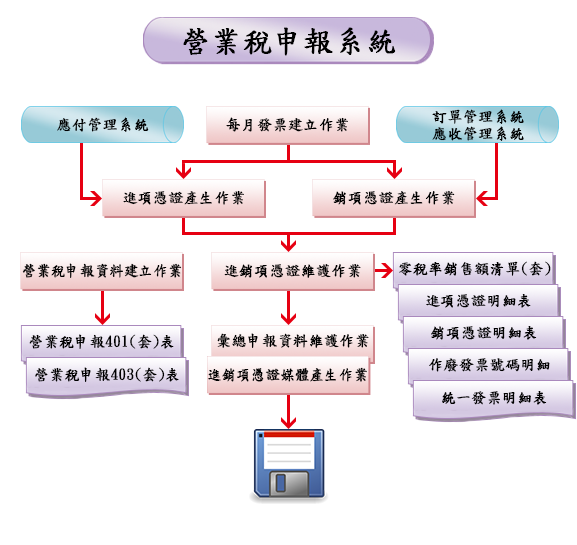
<style>
.page{position:relative;width:577px;height:545px;background:#ffffff}
.page>*{position:absolute;margin:0}
.t1{font:30px "DFKaiShu-SB-Estd-BF";color:#000000;font-weight:bold}
.t2{font:15px/17.5px "DFKaiShu-SB-Estd-BF";color:#000000;font-weight:bold}
.t3{font:15px "DFKaiShu-SB-Estd-BF";color:#000000;font-weight:bold}
.t4{font:15px "DFKaiShu-SB-Estd-BF";color:#000000;font-weight:bold;scale:0.95 1}
</style>
<div class="page">
<p class="t1" style="left:183px;top:27px;width:213px;height:29px">營業稅申報系統</p>
<p class="t2" style="left:432px;top:109px;width:92px;height:32px;text-align:center">訂單管理系統<br>應收管理系統</p>
<p class="t3" style="left:57px;top:117px;width:92px;height:15px">應付管理系統</p>
<p class="t3" style="left:226px;top:117px;width:122px;height:15px">每月發票建立作業</p>
<p class="t3" style="left:123px;top:190px;width:121px;height:15px">進項憑證產生作業</p>
<p class="t3" style="left:333px;top:190px;width:122px;height:15px">銷項憑證產生作業</p>
<p class="t4" style="left:22px;top:263px;width:160px;height:15px">營業稅申報資料建立作業</p>
<p class="t3" style="left:224px;top:264px;width:137px;height:14px">進銷項憑證維護作業</p>
<p class="t3" style="left:399px;top:261px;width:152px;height:15px">零稅率銷售額清單(套)</p>
<p class="t3" style="left:426px;top:294px;width:105px;height:14px">進項憑證明細表</p>
<p class="t3" style="left:431px;top:326px;width:106px;height:14px">銷項憑證明細表</p>
<p class="t3" style="left:29px;top:334px;width:145px;height:15px">營業稅申報401(套)表</p>
<p class="t3" style="left:217px;top:333px;width:152px;height:15px">彙總申報資料維護作業</p>
<p class="t3" style="left:429px;top:358px;width:121px;height:14px">作廢發票號碼明細</p>
<p class="t3" style="left:35px;top:367px;width:144px;height:15px">營業稅申報403(套)表</p>
<p class="t4" style="left:208px;top:367px;width:159px;height:15px">進銷項憑證媒體產生作業</p>
<p class="t3" style="left:442px;top:391px;width:105px;height:14px">統一發票明細表</p>
</div>
